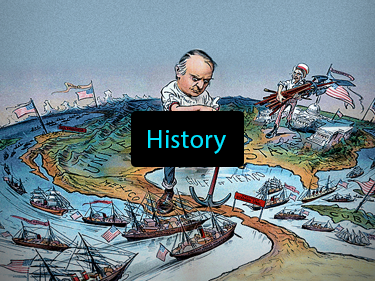
<style>
.page{position:relative;width:375px;height:281px}
.page>*{position:absolute;margin:0}
.t1{font:26.7px "MyriadPro-Regular";color:#00e5ff}
</style>
<div class="page">
<p class="t1" style="left:148px;top:130px;width:78px;height:24px">History</p>
</div>
